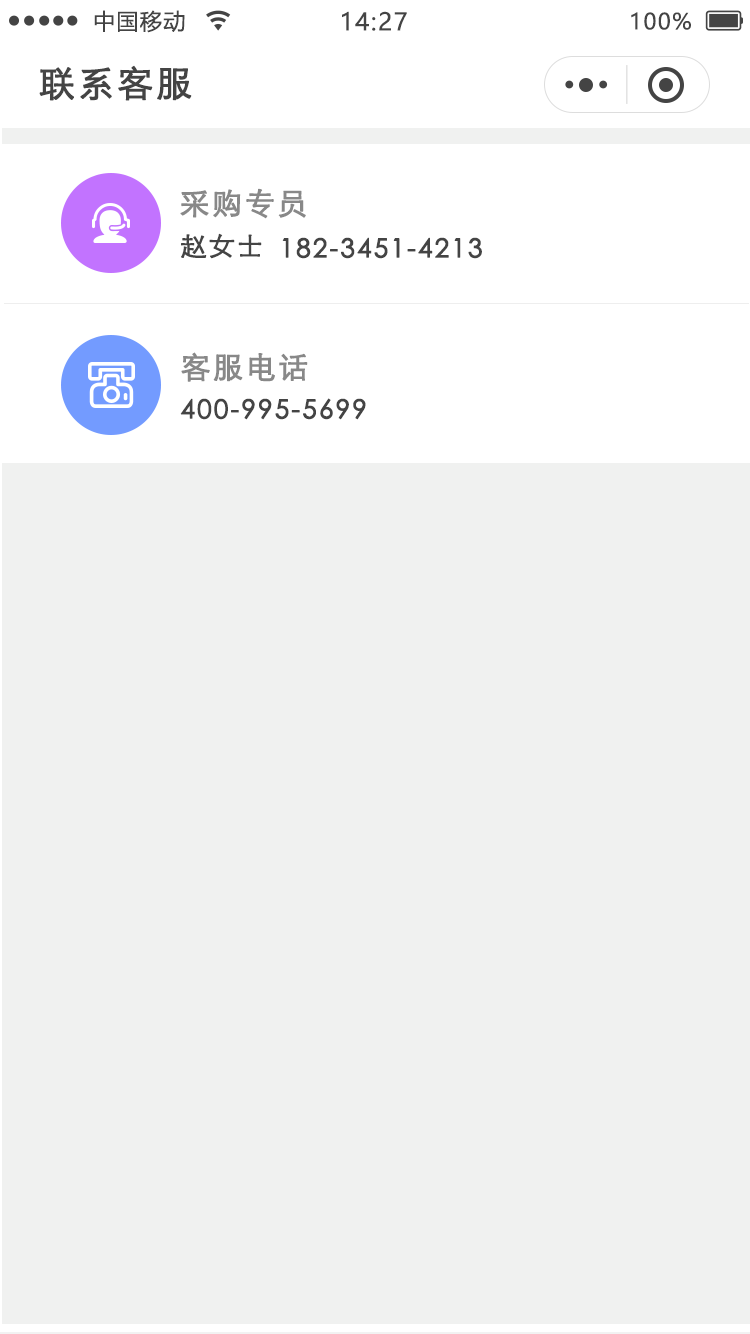
<style>
.page{position:relative;width:750px;height:1334px;background:#f0f1f0}
.page>*{position:absolute;margin:0}
.t1{font:22px "MicrosoftYaHei";letter-spacing:0.06em;color:#444444}
.t2{font:24px "MicrosoftYaHei";letter-spacing:0.06em;color:#444444}
.t3{font:36px "STXihei";letter-spacing:0.06em;color:#444444;font-weight:bold}
.t4{font:30px "STXihei";letter-spacing:0.06em;color:#888888;font-weight:bold}
.t5{font:26px "STXihei";letter-spacing:0.06em;color:#444444;font-weight:bold}
</style>
<div class="page">
<p class="t1" style="left:94px;top:10px;width:91px;height:23px">中国移动</p>
<p class="t2" style="left:342px;top:11px;width:65px;height:20px">14:27</p>
<p class="t1" style="left:631px;top:12px;width:60px;height:18px">100%</p>
<p class="t3" style="left:39px;top:65px;width:153px;height:36px">联系客服</p>
<p class="t4" style="left:180px;top:188px;width:126px;height:31px">采购专员</p>
<p class="t5" style="left:181px;top:233px;width:81px;height:26px">赵女士</p>
<p class="t5" style="left:282px;top:237px;width:200px;height:22px">182-3451-4213</p>
<p class="t4" style="left:181px;top:352px;width:127px;height:30px">客服电话</p>
<p class="t5" style="left:180px;top:398px;width:186px;height:22px">400-995-5699</p>
</div>
